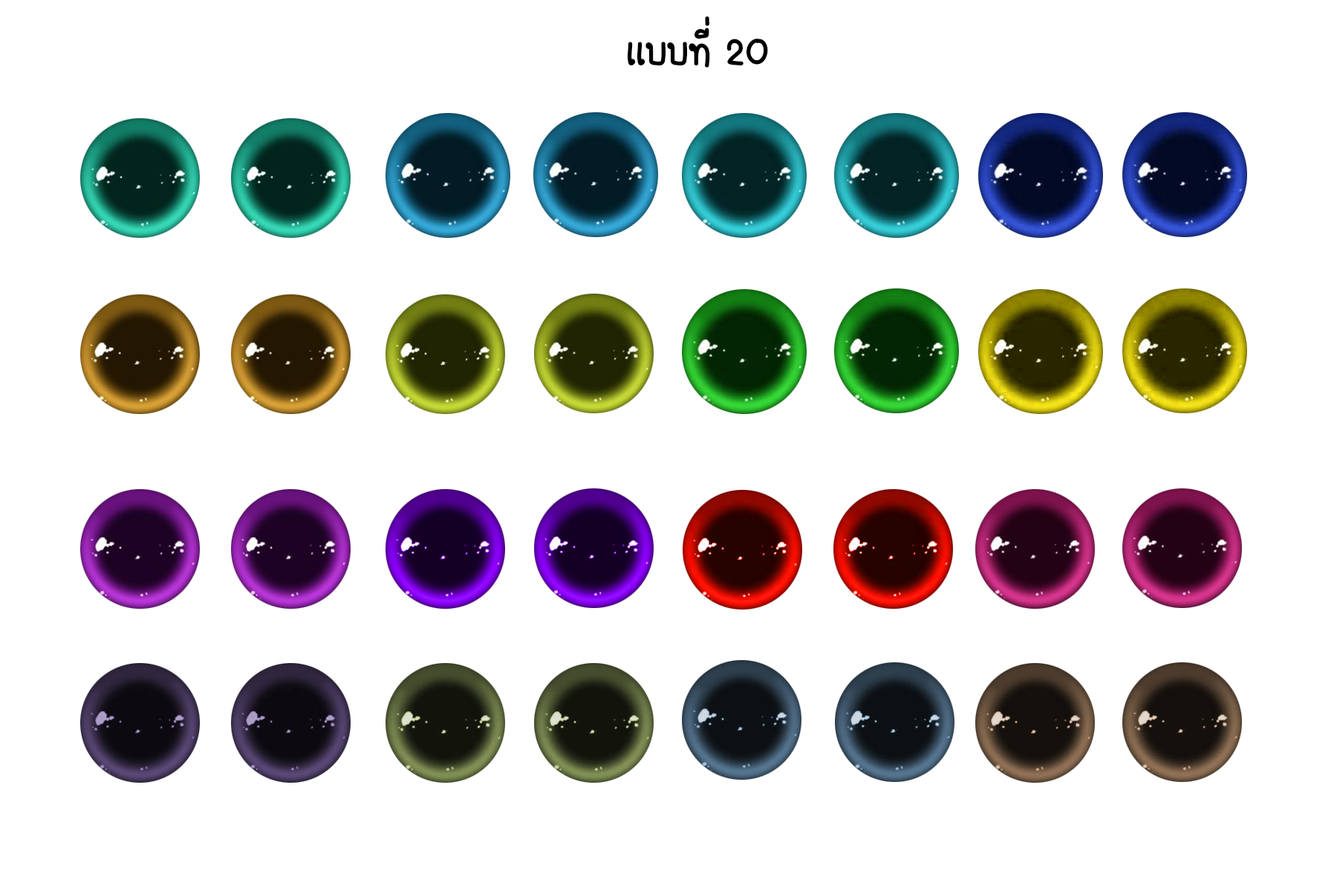
<style>
.page{position:relative;width:1337px;height:892px;background:#ffffff}
.page>*{position:absolute;margin:0}
.t1{font:55.7px "FCDaisyRegular";color:#000000}
</style>
<div class="page">
<p class="t1" style="left:627px;top:16px;width:141px;height:52px">เเบบที่ 20</p>
</div>
